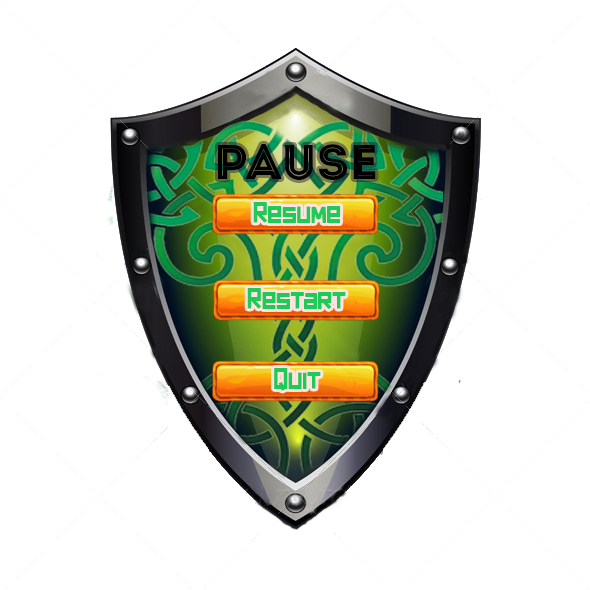
<style>
.page{position:relative;width:590px;height:590px;background:#ffffff}
.page>*{position:absolute;margin:0}
.t1{font:49.1px "Intro-Inline";color:#000000}
.t2{font:29.8px "darkforest";color:#1dcb56}
</style>
<div class="page">
<p class="t1" style="left:218px;top:144px;width:158px;height:36px">PAUSE</p>
<p class="t2" style="left:253px;top:202px;width:88px;height:21px">Resume</p>
<p class="t2" style="left:247px;top:288px;width:99px;height:21px">Restart</p>
<p class="t2" style="left:274px;top:368px;width:47px;height:23px">Quit</p>
</div>
